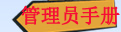
<style>
.page{position:relative;width:121px;height:32px}
.page>*{position:absolute;margin:0}
.t1{font:20px "SimSun";color:#f60f35;font-weight:bold}
</style>
<div class="page">
<p class="t1" style="left:21px;top:5px;width:99px;height:20px">管理员手册</p>
</div>
